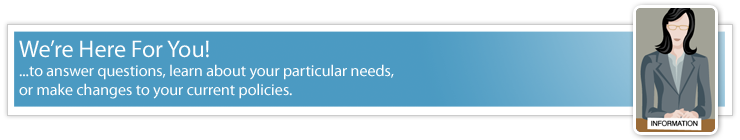
<style>
.page{position:relative;width:740px;height:140px;background:#ffffff}
.page>*{position:absolute;margin:0}
.t1{font:16px "MyriadPro-Regular";color:#fefefe}
.t2{font:24px "MyriadPro-Regular";color:#fefefe}
</style>
<div class="page">
<p class="t1" style="left:19px;top:40px;width:375px;height:59px"><span class="t2">We’re Here For You!<br></span>...to answer questions, learn about your particular needs, <br>or make changes to your current policies.</p>
</div>
